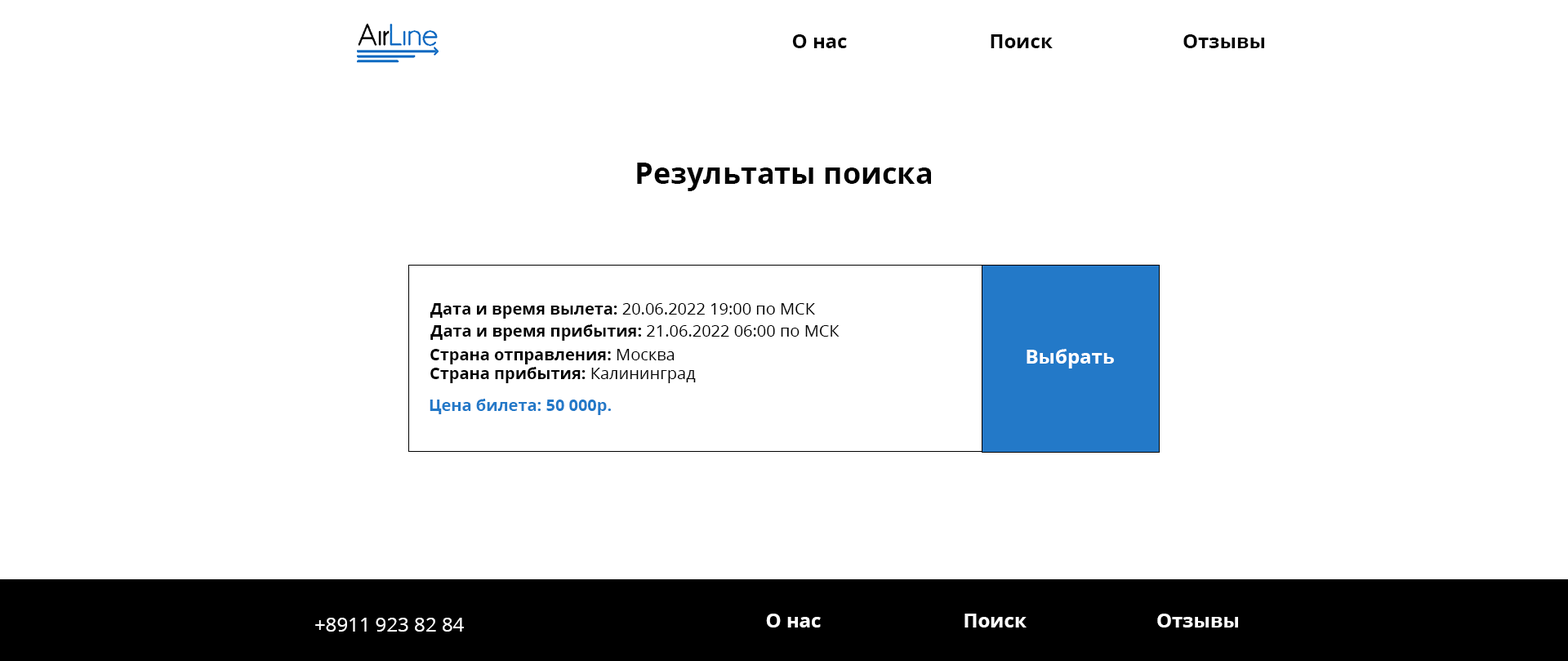
<style>
.page{position:relative;width:1568px;height:661px;background:#ffffff}
.page>*{position:absolute;margin:0}
.t1{font:19.6px "OpenSans-Bold";color:#000000}
.t2{font:29.4px "OpenSans-Bold";color:#000000}
.t3{font:16.3px "OpenSans-Regular";color:#000000}
.t4{font:16.3px "OpenSans-Bold";color:#000000}
.t5{font:19.6px "OpenSans-Bold";color:#ffffff}
.t6{font:16.3px "OpenSans-Bold";color:#2379c8}
.t7{font:19.6px "OpenSans-Regular";color:#ffffff}
</style>
<div class="page">
<p class="t1" style="left:792px;top:34px;width:55px;height:14px">О нас</p>
<p class="t1" style="left:991px;top:34px;width:62px;height:14px">Поиск</p>
<p class="t1" style="left:1183px;top:34px;width:81px;height:14px">Отзывы</p>
<p class="t2" style="left:637px;top:163px;width:294px;height:28px">Результаты поиска</p>
<p class="t3" style="left:430px;top:303px;width:385px;height:15px"><span class="t4">Дата и время вылета: </span>20.06.2022 19:00 по МСК</p>
<p class="t3" style="left:430px;top:324px;width:410px;height:17px"><span class="t4">Дата и время прибытия: </span>21.06.2022 06:00 по МСК</p>
<p class="t4" style="left:430px;top:349px;width:245px;height:15px">Страна отправления: <span class="t3">Москва</span></p>
<p class="t5" style="left:1027px;top:349px;width:87px;height:19px">Выбрать</p>
<p class="t4" style="left:430px;top:367px;width:266px;height:16px">Страна прибытия: <span class="t3">Калининград</span></p>
<p class="t6" style="left:430px;top:399px;width:181px;height:16px">Цена билета: 50 000р.</p>
<p class="t7" style="left:315px;top:617px;width:149px;height:14px">+8911 923 82 84</p>
<p class="t5" style="left:766px;top:613px;width:55px;height:14px">О нас</p>
<p class="t5" style="left:964px;top:613px;width:63px;height:14px">Поиск</p>
<p class="t5" style="left:1157px;top:613px;width:81px;height:14px">Отзывы</p>
</div>
